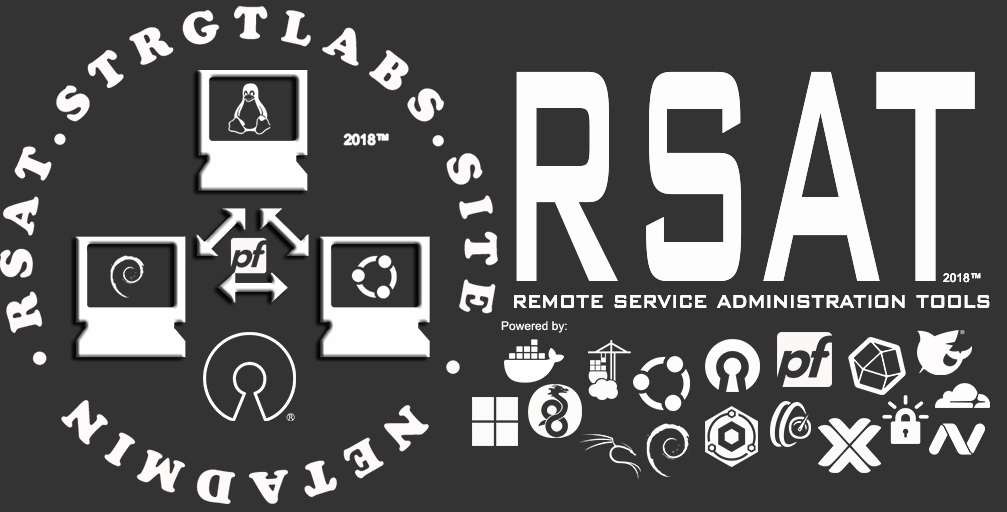
<style>
.page{position:relative;width:1007px;height:512px;background:#333333}
.page>*{position:absolute;margin:0}
.t1{font:405.5px "BankGothicBT-Medium";color:#fefdfd;scale:0.41 1}
.t2{font:12px "ArialMT";color:#fefdfd}
.t3{font:30.2px "BankGothicBT-Medium";color:#fefdfd;scale:0.77 1}
</style>
<div class="page">
<p class="t1" style="left:516px;top:71px;width:459px;height:210px">RSAT</p>
<p class="t1" style="left:516px;top:71px;width:459px;height:210px">RSAT</p>
<p class="t2" style="left:943px;top:273px;width:38px;height:10px">2018™</p>
<p class="t2" style="left:943px;top:273px;width:38px;height:10px">2018™</p>
<p class="t2" style="left:943px;top:273px;width:38px;height:10px">2018™</p>
<p class="t3" style="left:514px;top:295px;width:476px;height:13px">remote service administration tools</p>
<p class="t3" style="left:514px;top:295px;width:476px;height:13px">remote service administration tools</p>
<p class="t2" style="left:501px;top:321px;width:66px;height:12px">Powered by:</p>
</div>
